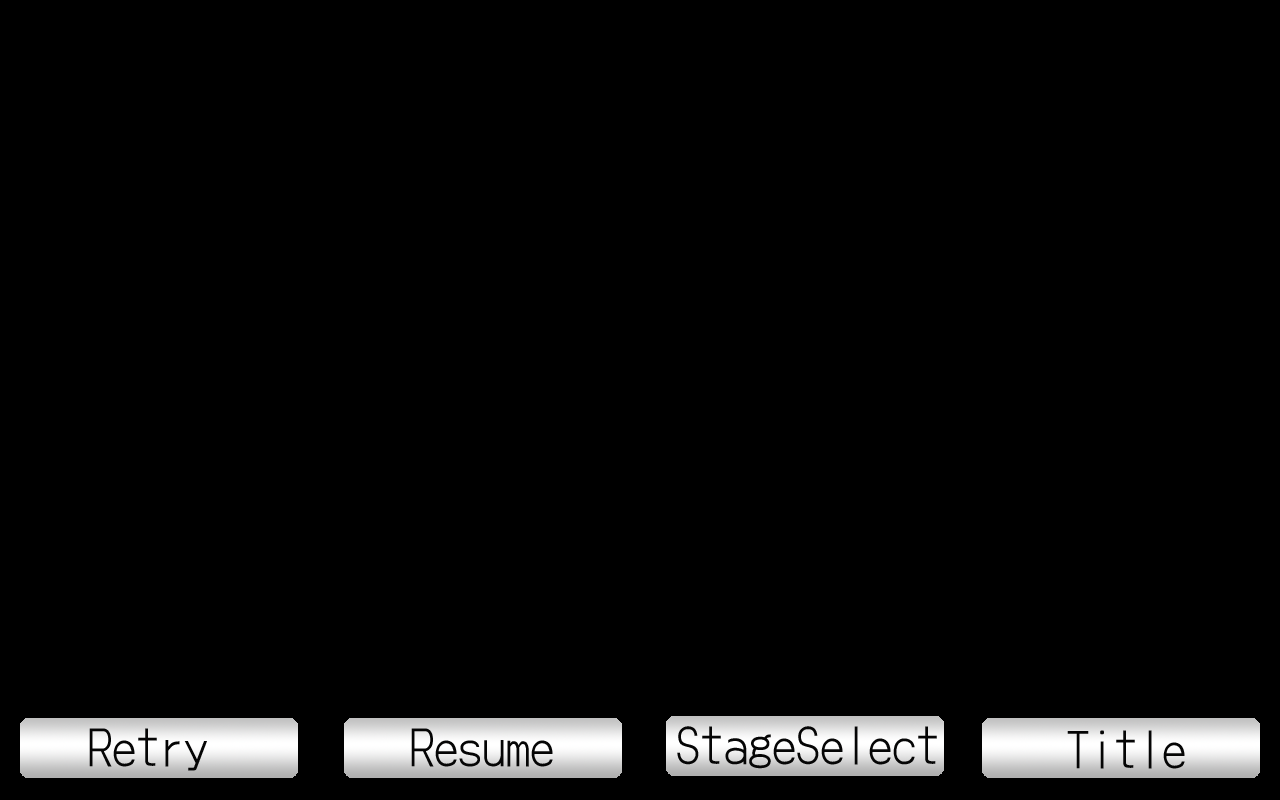
<style>
.page{position:relative;width:1280px;height:800px;background:#000000}
.page>*{position:absolute;margin:0}
.t1{font:48px "ARADGothicJP-Medium";color:#050505}
</style>
<div class="page">
<p class="t1" style="left:677px;top:726px;width:260px;height:43px">StageSelect</p>
<p class="t1" style="left:89px;top:728px;width:118px;height:43px">Retry</p>
<p class="t1" style="left:411px;top:728px;width:142px;height:39px">Resume</p>
<p class="t1" style="left:1067px;top:730px;width:118px;height:39px">Title</p>
</div>
